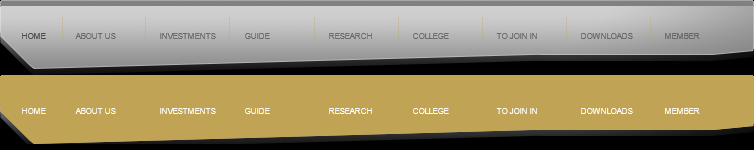
<style>
.page{position:relative;width:754px;height:150px;background:#c0a354}
.page>*{position:absolute;margin:0}
.t1{font:8px "ArialMT";color:#6b6969;text-transform:uppercase}
.t2{font:8px "ArialMT";color:#6c6a6a;text-transform:uppercase}
.t3{font:8px "ArialMT";color:#6c6969;text-transform:uppercase}
.t4{font:8px "ArialMT";color:#6a6868;text-transform:uppercase}
.t5{font:8px "ArialMT";color:#666464;text-transform:uppercase}
.t6{font:8px "ArialMT";color:#ffffff;text-transform:uppercase}
</style>
<div class="page">
<p class="t1" style="left:75px;top:33px;width:41px;height:6px">about us</p>
<p class="t2" style="left:160px;top:33px;width:56px;height:6px">investments</p>
<p class="t1" style="left:245px;top:33px;width:25px;height:6px">guide</p>
<p class="t3" style="left:329px;top:33px;width:43px;height:6px">Research</p>
<p class="t1" style="left:413px;top:33px;width:36px;height:6px">college</p>
<p class="t2" style="left:496px;top:33px;width:41px;height:6px">To join in</p>
<p class="t4" style="left:581px;top:33px;width:52px;height:6px">downloads</p>
<p class="t5" style="left:665px;top:33px;width:35px;height:6px">member</p>
<p class="t6" style="left:22px;top:108px;width:24px;height:6px">Home</p>
<p class="t6" style="left:75px;top:108px;width:41px;height:6px">about us</p>
<p class="t6" style="left:160px;top:108px;width:56px;height:6px">investments</p>
<p class="t6" style="left:245px;top:108px;width:25px;height:6px">guide</p>
<p class="t6" style="left:329px;top:108px;width:43px;height:6px">Research</p>
<p class="t6" style="left:413px;top:108px;width:36px;height:6px">college</p>
<p class="t6" style="left:496px;top:108px;width:41px;height:6px">To join in</p>
<p class="t6" style="left:581px;top:108px;width:52px;height:6px">downloads</p>
<p class="t6" style="left:665px;top:108px;width:35px;height:6px">member</p>
</div>
